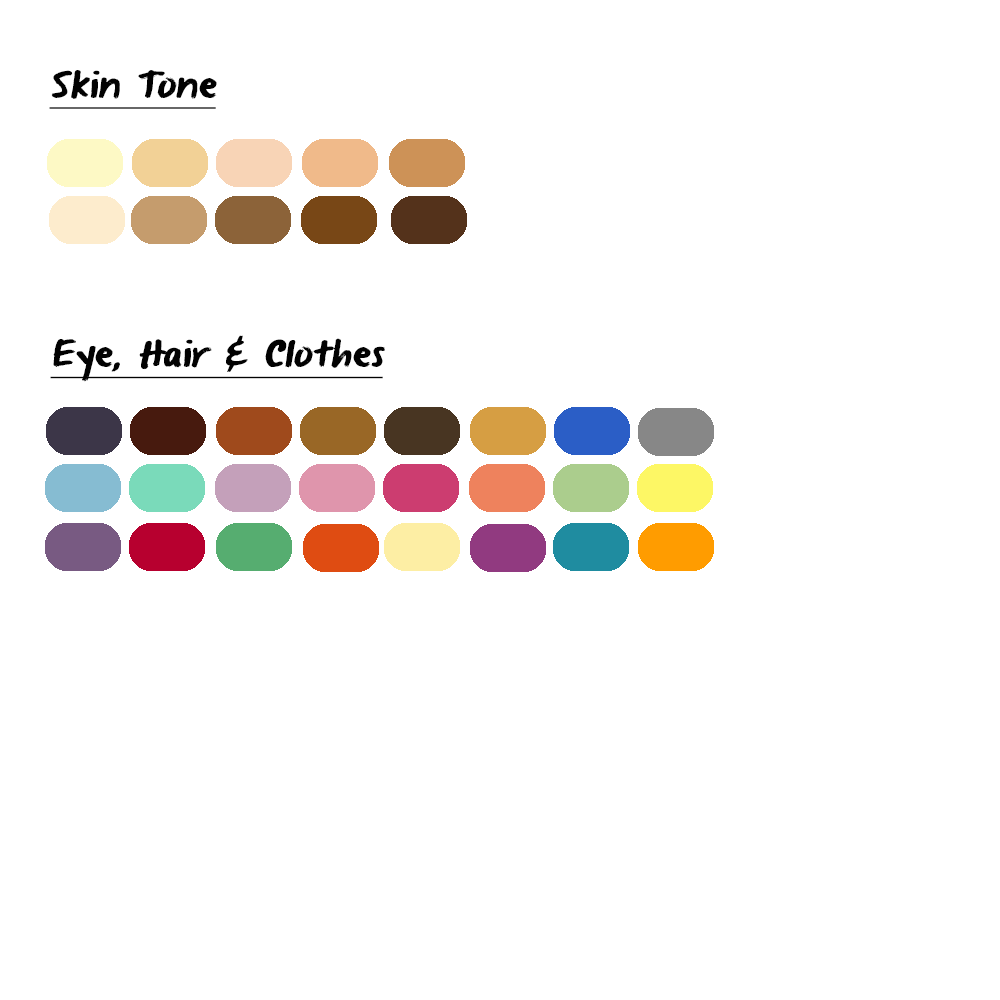
<style>
.page{position:relative;width:1000px;height:1000px;background:#ffffff}
.page>*{position:absolute;margin:0}
.t1{font:50px "FromWhereYouAre";letter-spacing:-0.007em;color:#020202;font-style:italic;text-decoration:underline}
</style>
<div class="page">
<p class="t1" style="left:49px;top:70px;width:168px;height:39px">Skin Tone</p>
<p class="t1" style="left:50px;top:335px;width:335px;height:47px">Eye, Hair &amp; Clothes</p>
</div>
